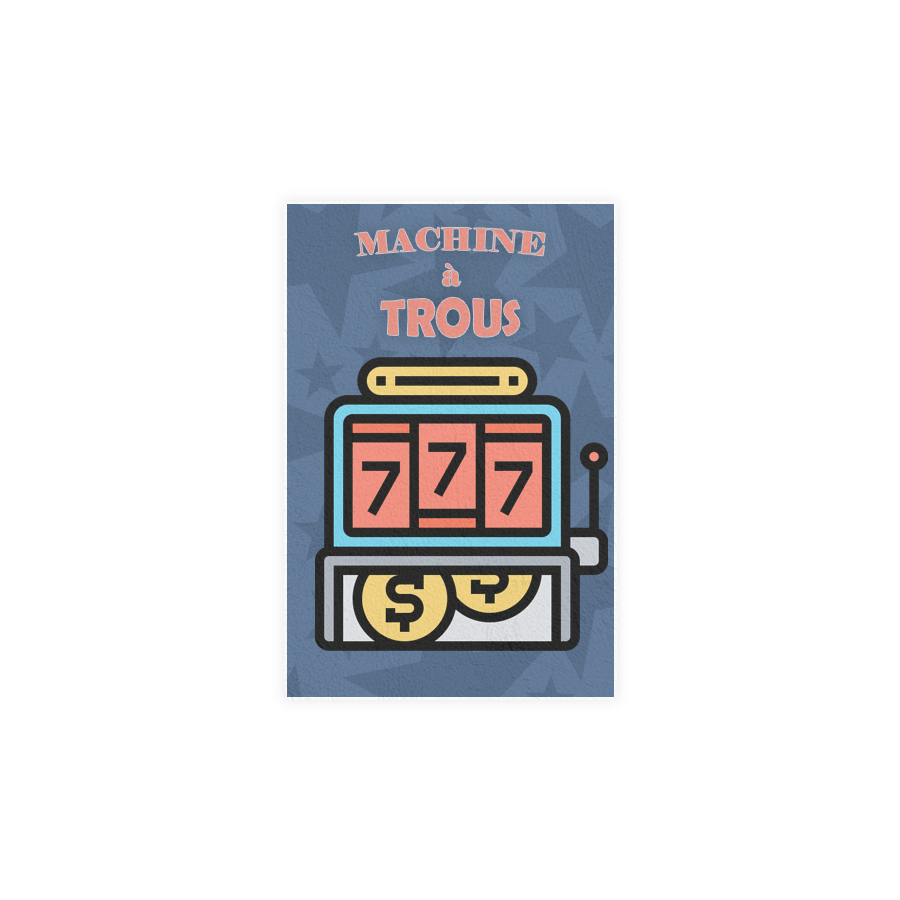
<style>
.page{position:relative;width:900px;height:900px;background:#ffffff}
.page>*{position:absolute;margin:0}
.t1{font:29.7px "Elephant-Regular";color:#e88c7f}
.t2{font:47.2px "BerlinSansFBDemi-Bold";color:#e88c7f}
</style>
<div class="page">
<p class="t1" style="left:354px;top:227px;width:191px;height:59px;text-align:center">MACHINE<br>à</p>
<p class="t2" style="left:381px;top:297px;width:139px;height:41px">TROUS</p>
</div>
